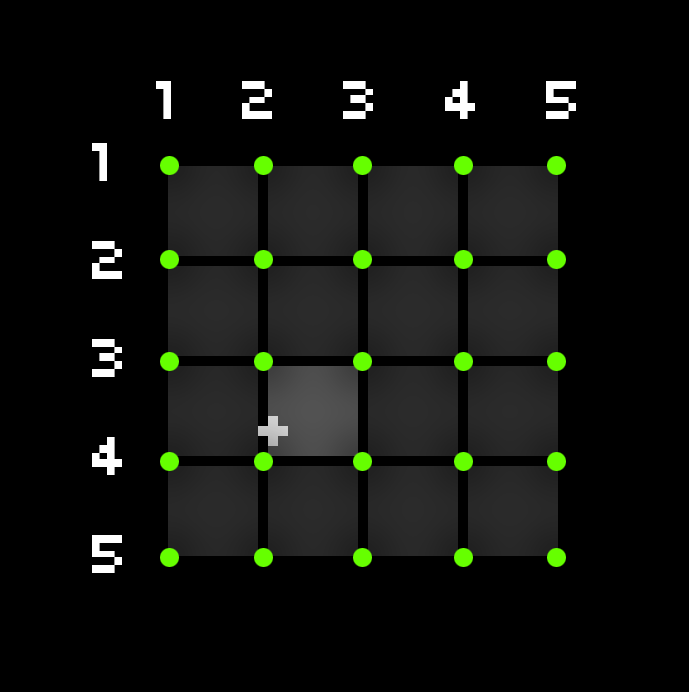
<style>
.page{position:relative;width:689px;height:692px;background:#000000}
.page>*{position:absolute;margin:0}
.t1{font:60px "04b03";letter-spacing:0.28em;color:#ffffff}
.t2{font:60px/98px "04b03";letter-spacing:0.28em;color:#ffffff}
</style>
<div class="page">
<p class="t1" style="left:156px;top:81px;width:420px;height:38px">1 2 3 4 5</p>
<p class="t2" style="left:92px;top:143px;width:30px;height:430px">1<br>2<br>3<br>4<br>5</p>
</div>
